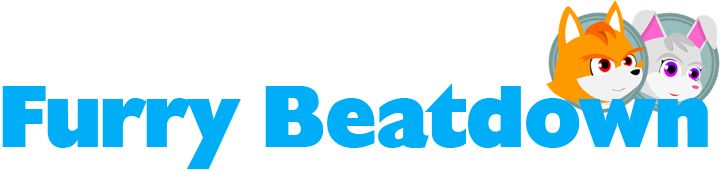
<style>
.page{position:relative;width:721px;height:171px;background:#ffffff}
.page>*{position:absolute;margin:0}
.t1{font:85px "ChansonHeavySFBold";color:#00aef7}
</style>
<div class="page">
<p class="t1" style="left:2px;top:83px;width:706px;height:86px">Furry Beatdown</p>
</div>
